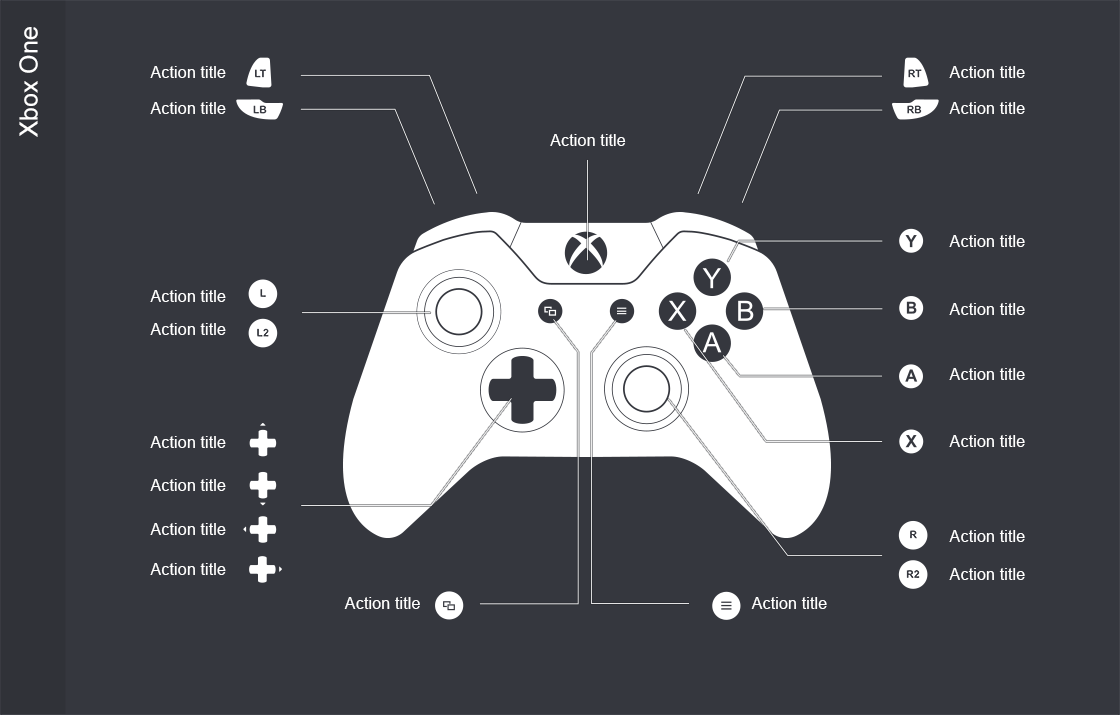
<style>
.page{position:relative;width:1120px;height:715px;background:#35373e}
.page>*{position:absolute;margin:0}
.t1{font:25px "ArialMT";color:#ffffff}
.t2{font:16.4px "ArialMT";color:#ffffff}
</style>
<div class="page">
<p class="t1" style="left:19px;top:27px;width:19px;height:110px;rotate:-90deg">Xbox One</p>
<p class="t2" style="left:150px;top:66px;width:76px;height:12px">Action title</p>
<p class="t2" style="left:949px;top:66px;width:76px;height:12px">Action title</p>
<p class="t2" style="left:150px;top:102px;width:76px;height:12px">Action title</p>
<p class="t2" style="left:949px;top:102px;width:76px;height:12px">Action title</p>
<p class="t2" style="left:550px;top:134px;width:76px;height:12px">Action title</p>
<p class="t2" style="left:949px;top:235px;width:76px;height:12px">Action title</p>
<p class="t2" style="left:150px;top:290px;width:76px;height:12px">Action title</p>
<p class="t2" style="left:949px;top:303px;width:76px;height:12px">Action title</p>
<p class="t2" style="left:150px;top:323px;width:76px;height:12px">Action title</p>
<p class="t2" style="left:949px;top:368px;width:76px;height:12px">Action title</p>
<p class="t2" style="left:150px;top:436px;width:76px;height:12px">Action title</p>
<p class="t2" style="left:949px;top:435px;width:76px;height:12px">Action title</p>
<p class="t2" style="left:150px;top:479px;width:76px;height:12px">Action title</p>
<p class="t2" style="left:150px;top:523px;width:76px;height:12px">Action title</p>
<p class="t2" style="left:949px;top:530px;width:76px;height:12px">Action title</p>
<p class="t2" style="left:150px;top:563px;width:76px;height:12px">Action title</p>
<p class="t2" style="left:949px;top:568px;width:76px;height:12px">Action title</p>
<p class="t2" style="left:344px;top:597px;width:76px;height:12px">Action title</p>
<p class="t2" style="left:751px;top:597px;width:76px;height:12px">Action title</p>
</div>
